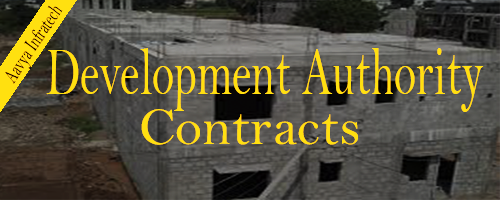
<style>
.page{position:relative;width:500px;height:200px}
.page>*{position:absolute;margin:0}
.t1{font:20.9px "BellMT";color:#000000;scale:0.65 1}
.t2{font:69.2px "BellMT";color:#ffe010;scale:0.65 1}
.t3{font:53.6px "BellMT";color:#ffe010}
</style>
<div class="page">
<p class="t1" style="left:5px;top:5px;width:58px;height:79px;rotate:-56deg">Aavya Infratech</p>
<p class="t2" style="left:46px;top:48px;width:438px;height:64px">Development Authority</p>
<p class="t3" style="left:141px;top:109px;width:217px;height:36px">Contracts</p>
</div>
